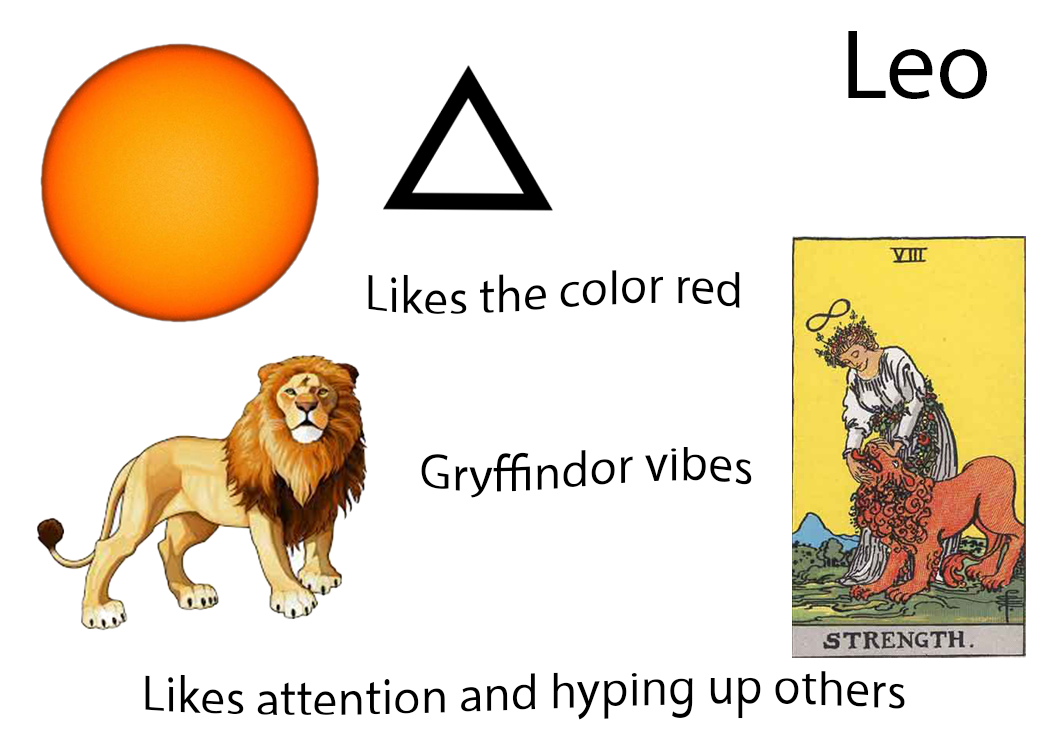
<style>
.page{position:relative;width:1050px;height:750px;background:#ffffff}
.page>*{position:absolute;margin:0}
.t1{font:100px "MyriadPro-Regular";color:#000000}
.t2{font:50px "MyriadPro-Regular";color:#000000}
</style>
<div class="page">
<p class="t1" style="left:848px;top:31px;width:139px;height:68px">Leo</p>
<p class="t2" style="left:368px;top:270px;width:372px;height:44px">Likes the color red</p>
<p class="t2" style="left:421px;top:447px;width:331px;height:51px">Gryffindor vibes</p>
<p class="t2" style="left:145px;top:671px;width:760px;height:49px">Likes attention and hyping up others</p>
</div>
